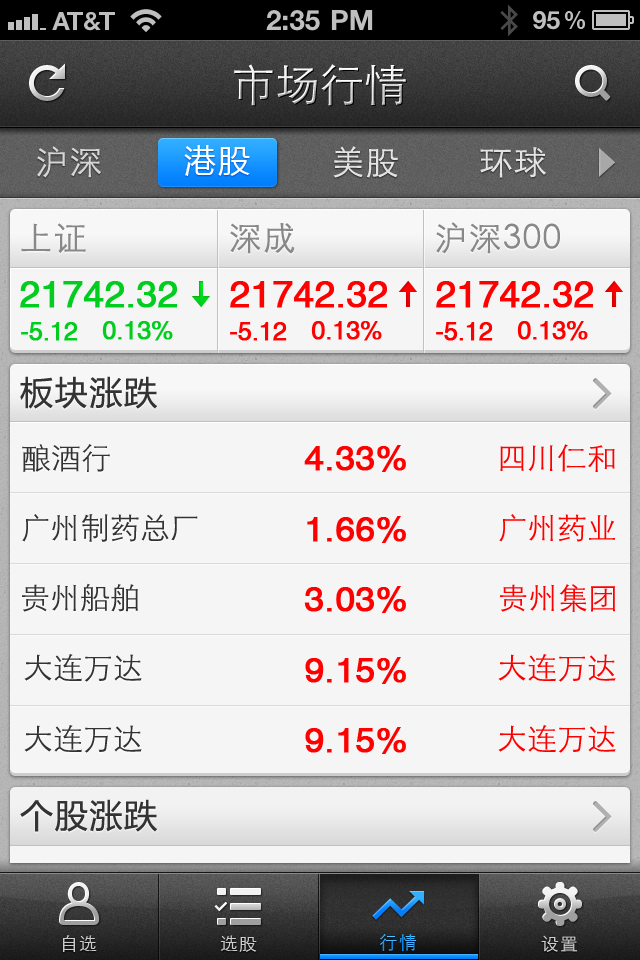
<style>
.page{position:relative;width:640px;height:960px;background:#f5f5f5}
.page>*{position:absolute;margin:0}
.t1{font:44px "STXihei";letter-spacing:0.005em}
.t2{font:33px "STXihei";letter-spacing:0.05em;color:#d6d6d6}
.t3{font:32px "MicrosoftYaHei";letter-spacing:0.05em;color:#ffffff}
.t4{font:33px "STXihei";letter-spacing:0.05em;color:#e3e3e3}
.t5{font:33px "STXihei";letter-spacing:0.05em;color:#888888}
.t6{font:37px "HelveticaCE-Regular";letter-spacing:-0.01em;color:#00cd1d;font-weight:bold}
.t7{font:37px "HelveticaCE-Regular";letter-spacing:-0.01em;color:#ff0000;font-weight:bold}
.t8{font:25px "HelveticaCE-Regular";letter-spacing:-0.025em;color:#00cd1d;font-weight:bold}
.t9{font:25px "HelveticaCE-Regular";letter-spacing:-0.025em;color:#ff0000;font-weight:bold}
.t10{font:33px "MicrosoftYaHei";letter-spacing:0.05em;color:#333333}
.t11{font:30px "STXihei";color:#333333}
.t12{font:35px "HelveticaCE-Regular";color:#ff0000;font-weight:bold}
.t13{font:30px "STXihei";color:#ff0000}
.t14{font:18px "STXihei";letter-spacing:0.05em;color:#cccccc}
.t15{font:18px "STXihei";letter-spacing:0.1em}
</style>
<div class="page">
<p class="t1" style="left:234px;top:64px;width:172px;height:42px">市场行情</p>
<p class="t2" style="left:37px;top:146px;width:64px;height:32px">沪深</p>
<p class="t3" style="left:184px;top:145px;width:66px;height:31px">港股</p>
<p class="t4" style="left:333px;top:146px;width:65px;height:32px">美股</p>
<p class="t4" style="left:480px;top:147px;width:66px;height:31px">环球</p>
<p class="t5" style="left:436px;top:222px;width:124px;height:32px">沪深300</p>
<p class="t5" style="left:21px;top:223px;width:65px;height:30px">上证</p>
<p class="t5" style="left:230px;top:223px;width:65px;height:31px">深成</p>
<p class="t6" style="left:20px;top:281px;width:157px;height:27px">21742.32</p>
<p class="t7" style="left:230px;top:281px;width:157px;height:27px">21742.32</p>
<p class="t7" style="left:436px;top:281px;width:157px;height:27px">21742.32</p>
<p class="t8" style="left:21px;top:322px;width:57px;height:19px">-5.12</p>
<p class="t8" style="left:102px;top:321px;width:71px;height:20px">0.13%</p>
<p class="t9" style="left:230px;top:322px;width:57px;height:19px">-5.12</p>
<p class="t9" style="left:311px;top:321px;width:71px;height:20px">0.13%</p>
<p class="t9" style="left:436px;top:322px;width:57px;height:19px">-5.12</p>
<p class="t9" style="left:517px;top:321px;width:71px;height:20px">0.13%</p>
<p class="t10" style="left:20px;top:376px;width:137px;height:33px">板块涨跌</p>
<p class="t11" style="left:22px;top:444px;width:88px;height:28px">酿酒行</p>
<p class="t12" style="left:304px;top:445px;width:102px;height:27px">4.33%</p>
<p class="t13" style="left:500px;top:444px;width:115px;height:28px">四川仁和</p>
<p class="t11" style="left:22px;top:514px;width:176px;height:28px">广州制药总厂</p>
<p class="t12" style="left:307px;top:516px;width:99px;height:27px">1.66%</p>
<p class="t13" style="left:499px;top:514px;width:116px;height:28px">广州药业</p>
<p class="t11" style="left:22px;top:583px;width:116px;height:29px">贵州船舶</p>
<p class="t12" style="left:304px;top:586px;width:102px;height:27px">3.03%</p>
<p class="t13" style="left:500px;top:584px;width:115px;height:28px">贵州集团</p>
<p class="t11" style="left:24px;top:654px;width:118px;height:28px">大连万达</p>
<p class="t13" style="left:498px;top:654px;width:118px;height:28px">大连万达</p>
<p class="t12" style="left:305px;top:657px;width:101px;height:27px">9.15%</p>
<p class="t11" style="left:24px;top:725px;width:118px;height:28px">大连万达</p>
<p class="t13" style="left:498px;top:725px;width:118px;height:28px">大连万达</p>
<p class="t12" style="left:305px;top:727px;width:101px;height:27px">9.15%</p>
<p class="t10" style="left:20px;top:799px;width:137px;height:33px">个股涨跌</p>
<p class="t14" style="left:62px;top:935px;width:35px;height:17px">自选</p>
<p class="t14" style="left:220px;top:935px;width:37px;height:17px">选股</p>
<p class="t15" style="left:379px;top:934px;width:38px;height:17px">行情</p>
<p class="t14" style="left:541px;top:935px;width:37px;height:17px">设置</p>
</div>
